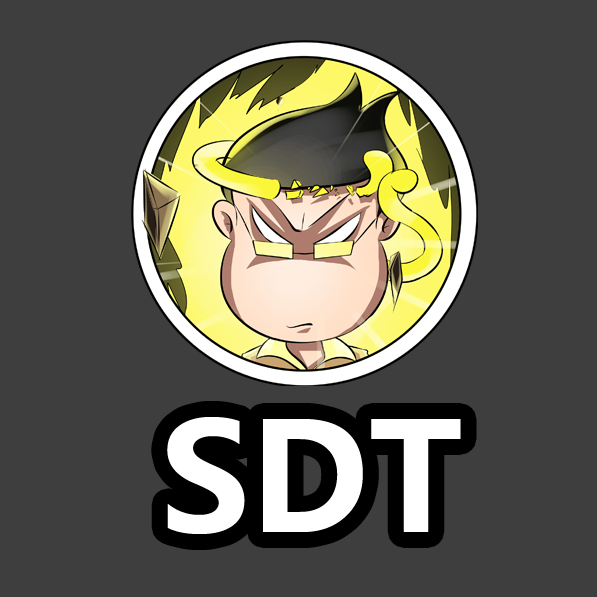
<style>
.page{position:relative;width:597px;height:597px;background:#3e3e3e}
.page>*{position:absolute;margin:0}
.t1{font:149.8px "MicrosoftYaHei-Bold";color:#ffffff}
</style>
<div class="page">
<p class="t1" style="left:167px;top:417px;width:294px;height:117px">SDT</p>
</div>
